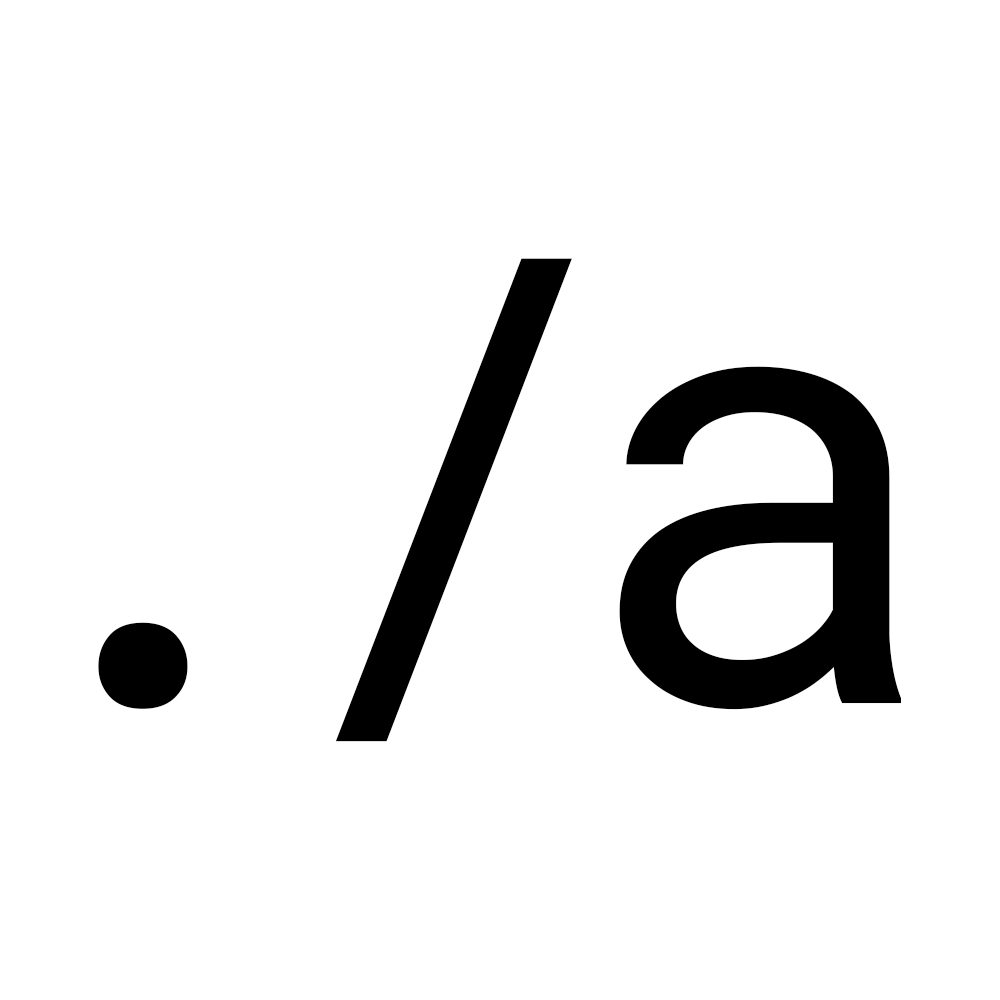
<style>
.page{position:relative;width:1000px;height:1000px;background:#ffffff}
.page>*{position:absolute;margin:0}
.t1{font:625px "RobotoMono-Regular";letter-spacing:-0.1em;color:#000000}
</style>
<div class="page">
<p class="t1" style="left:98px;top:258px;width:803px;height:484px">./a</p>
</div>
